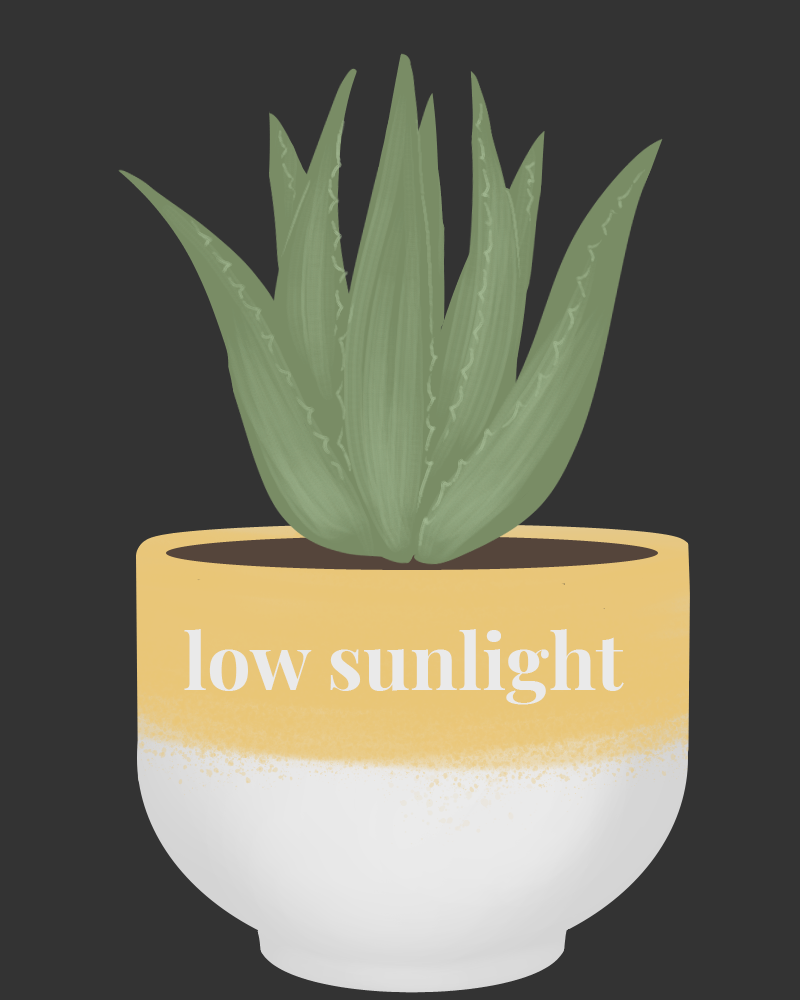
<style>
.page{position:relative;width:800px;height:1000px;background:#333333}
.page>*{position:absolute;margin:0}
.t1{font:77.8px "PlayfairDisplay-Bold";color:#eaeaea}
</style>
<div class="page">
<p class="t1" style="left:184px;top:629px;width:440px;height:76px">low sunlight</p>
</div>
